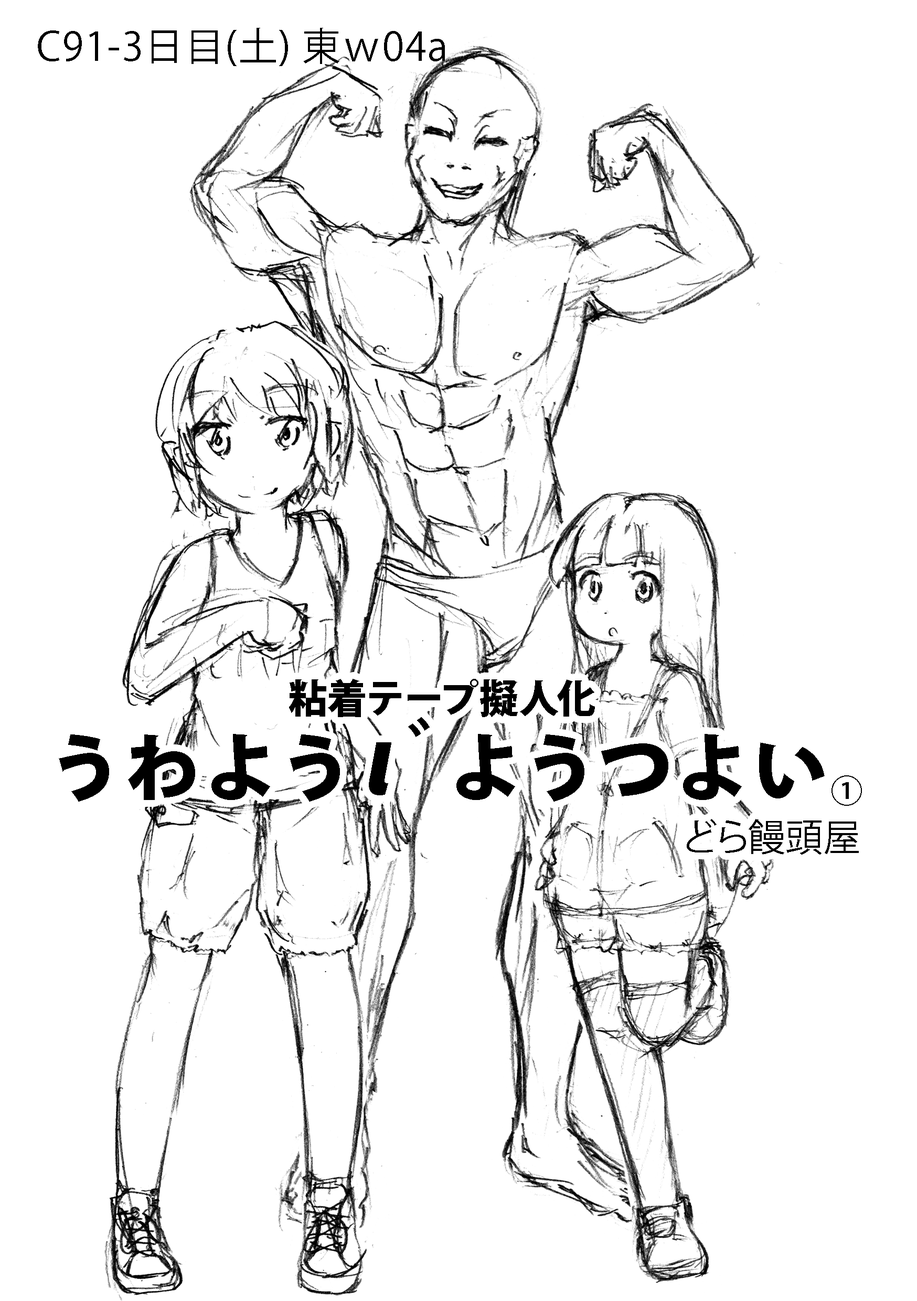
<style>
.page{position:relative;width:917px;height:1301px;background:#ffffff}
.page>*{position:absolute;margin:0}
.t1{font:39.3px "KozGoPro-Regular";letter-spacing:0.025em;color:#000000}
.t2{font:39.3px "KozGoPro-Heavy";letter-spacing:0.025em;color:#000000}
.t3{font:91.8px "KozGoPro-Heavy";letter-spacing:0.025em;color:#000000}
.t4{font:32.8px "KozGoPro-Medium";letter-spacing:0.025em;color:#000000}
.t5{font:37.1px "KozGoPro-Regular";letter-spacing:0.025em;color:#000000}
</style>
<div class="page">
<p class="t1" style="left:38px;top:28px;width:407px;height:38px">C91-3日目(土) 東ｗ04a</p>
<p class="t2" style="left:289px;top:679px;width:306px;height:38px">粘着テープ擬人化</p>
<p class="t3" style="left:59px;top:717px;width:765px;height:84px">ぅゎょぅι゛ょぅっょぃ</p>
<p class="t4" style="left:831px;top:775px;width:31px;height:31px">①</p>
<p class="t5" style="left:687px;top:819px;width:172px;height:35px">どら饅頭屋</p>
</div>
